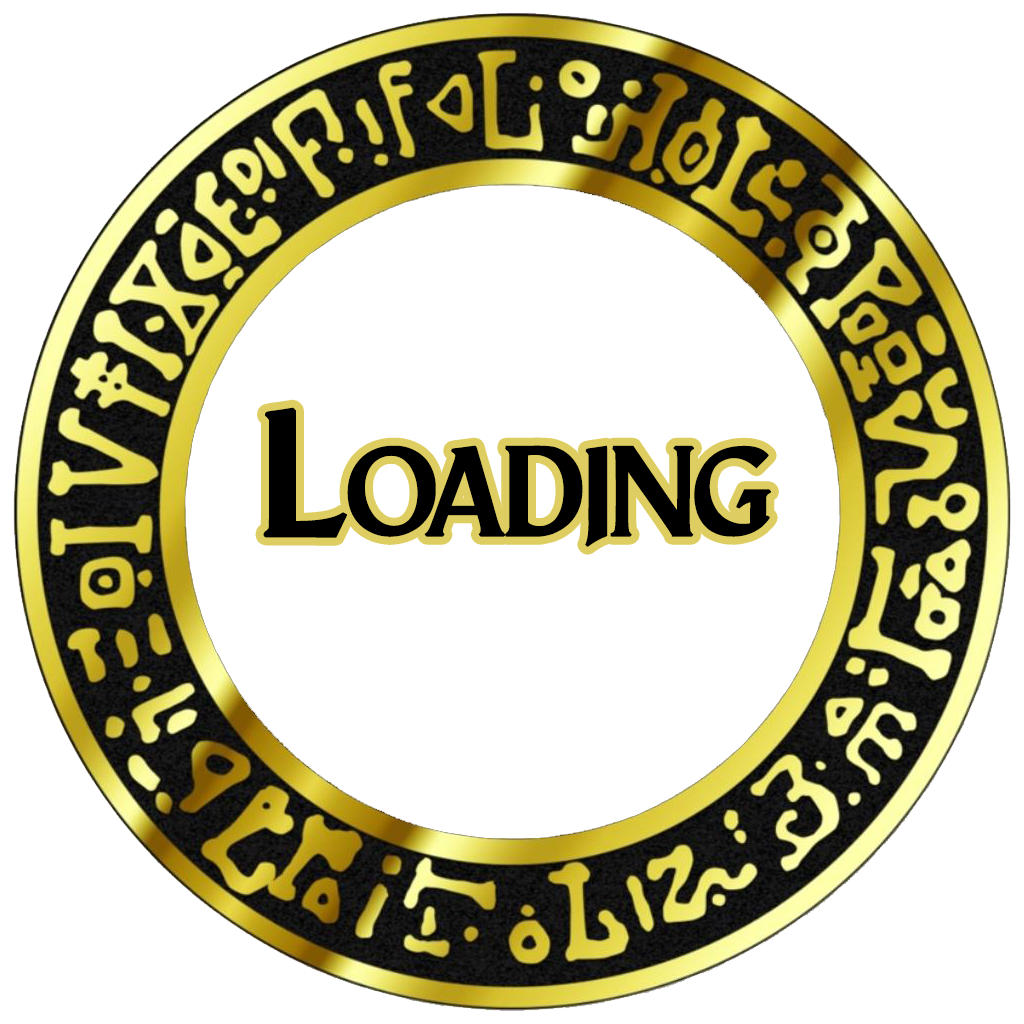
<style>
.page{position:relative;width:1024px;height:1024px;background:#ffffff}
.page>*{position:absolute;margin:0}
.t1{font:190px "DragonFire";color:#000000;font-variant:small-caps;font-weight:bold}
</style>
<div class="page">
<p class="t1" style="left:263px;top:407px;width:508px;height:140px">Loading</p>
</div>
